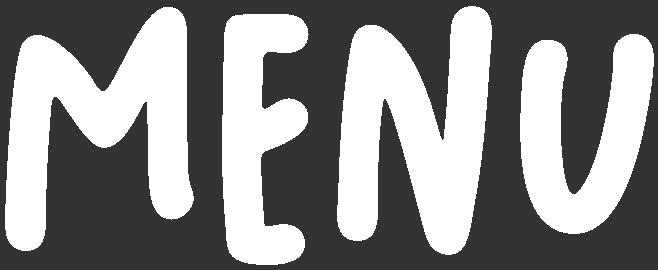
<style>
.page{position:relative;width:658px;height:270px;background:#333333}
.page>*{position:absolute;margin:0}
.t1{font:340.2px "BaksoSapi";letter-spacing:-0.04em;color:#ffffff;scale:0.74 1}
</style>
<div class="page">
<p class="t1" style="left:5px;top:6px;width:649px;height:259px">MENU</p>
</div>
